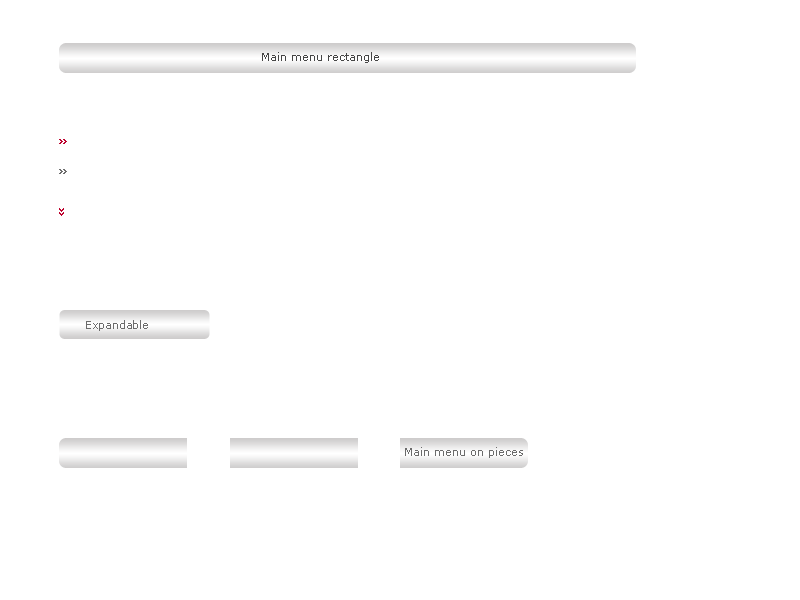
<style>
.page{position:relative;width:800px;height:600px;background:#ffffff}
.page>*{position:absolute;margin:0}
.t1{font:11px "Verdana";color:#454545}
.t2{font:11px "Verdana";color:#6b6b6b}
</style>
<div class="page">
<p class="t1" style="left:262px;top:52px;width:117px;height:11px">Main menu rectangle</p>
<p class="t2" style="left:86px;top:320px;width:62px;height:11px">Expandable</p>
<p class="t2" style="left:405px;top:447px;width:118px;height:11px">Main menu on pieces</p>
</div>
